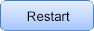
<style>
.page{position:relative;width:94px;height:31px}
.page>*{position:absolute;margin:0}
.t1{font:13.3px "ArialMT";color:#000000}
</style>
<div class="page">
<p class="t1" style="left:27px;top:11px;width:43px;height:10px">Restart</p>
</div>
